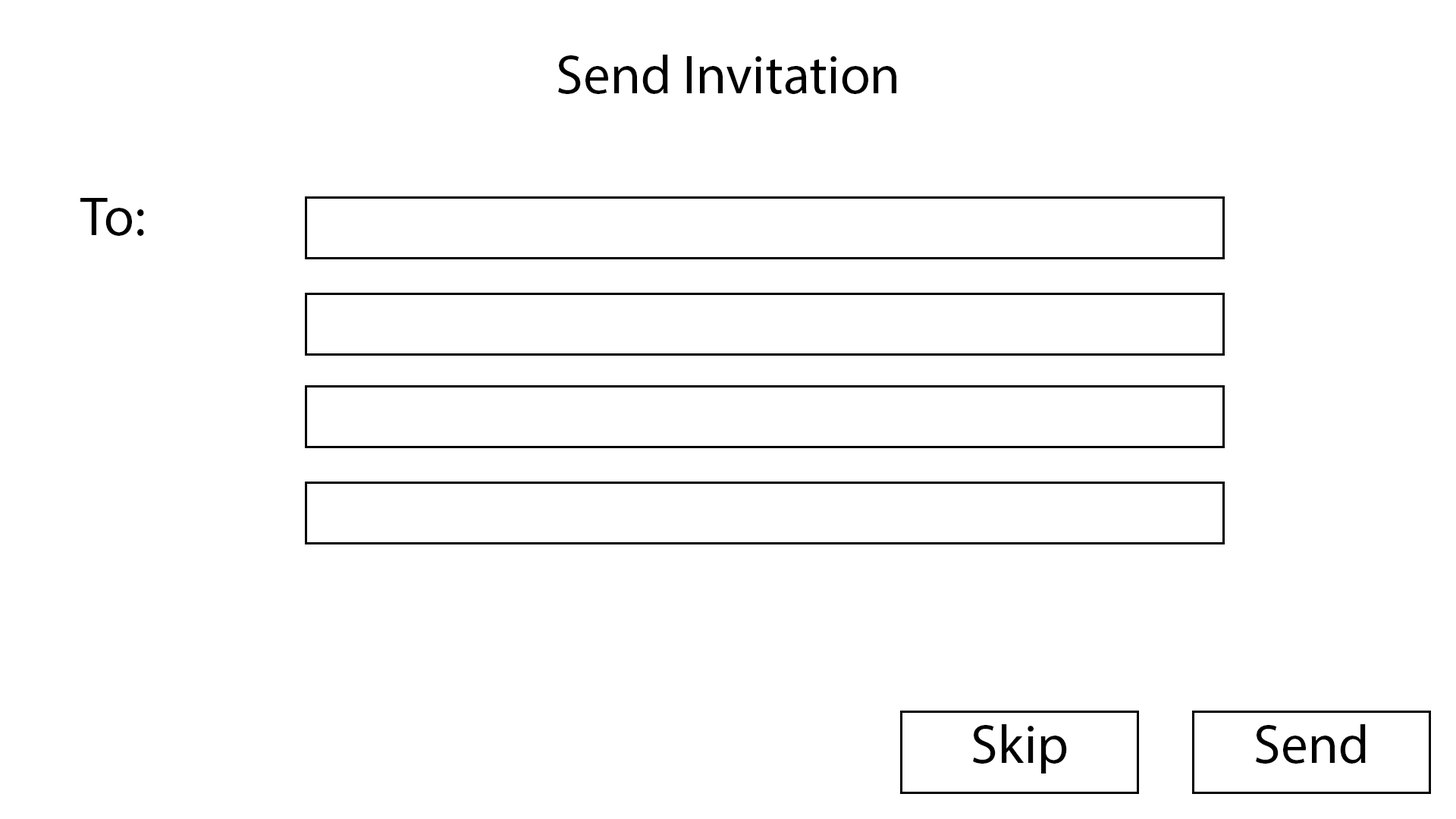
<style>
.page{position:relative;width:1456px;height:819px;background:#ffffff}
.page>*{position:absolute;margin:0}
.t1{font:54.6px "MyriadPro-Regular";color:#000000}
</style>
<div class="page">
<p class="t1" style="left:558px;top:55px;width:338px;height:39px">Send Invitation</p>
<p class="t1" style="left:80px;top:198px;width:64px;height:38px">To:</p>
<p class="t1" style="left:973px;top:724px;width:94px;height:49px">Skip</p>
<p class="t1" style="left:1256px;top:724px;width:110px;height:40px">Send</p>
</div>
